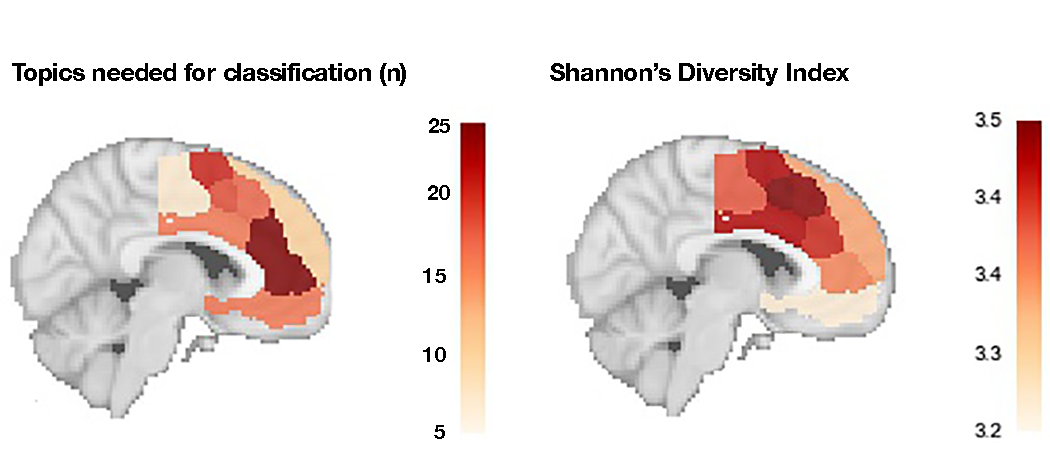
<style>
.page{position:relative;width:1050px;height:450px;background:#ffffff}
.page>*{position:absolute;margin:0}
.t1{font:25px "HelveticaNeue-Bold";letter-spacing:-0.01em;color:#000000}
.t2{font:20.8px "HelveticaNeue-Bold";letter-spacing:-0.01em;color:#000000}
</style>
<div class="page">
<p class="t1" style="left:12px;top:63px;width:837px;height:23px">Topics needed for classification (n)         Shannon’s Diversity Index</p>
<p class="t2" style="left:429px;top:118px;width:21px;height:15px">25</p>
<p class="t2" style="left:428px;top:185px;width:22px;height:15px">20</p>
<p class="t2" style="left:423px;top:268px;width:23px;height:15px">15</p>
<p class="t2" style="left:423px;top:347px;width:23px;height:15px">10</p>
<p class="t2" style="left:434px;top:425px;width:11px;height:14px">5</p>
</div>
